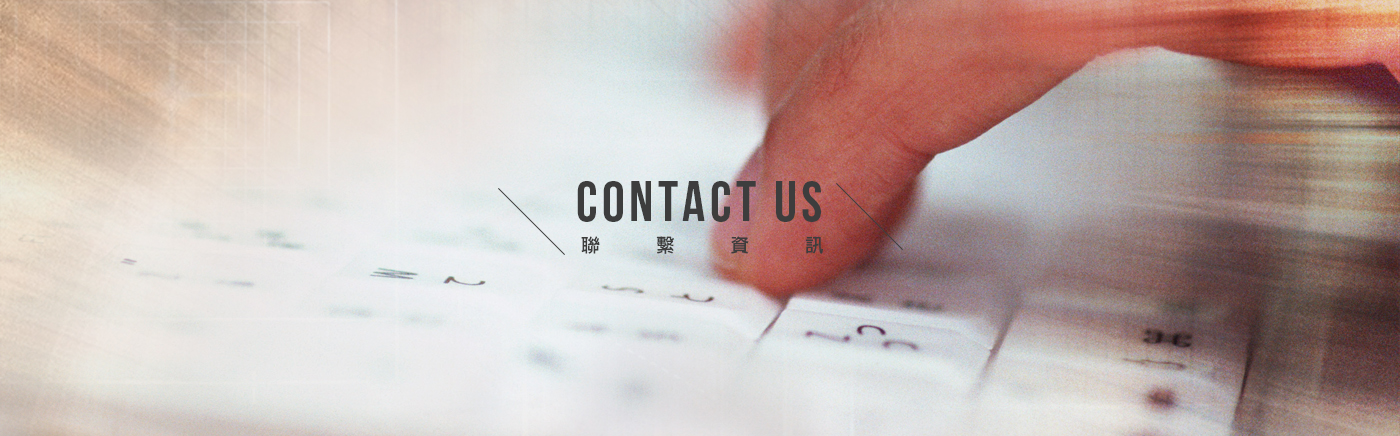
<style>
.page{position:relative;width:1400px;height:436px}
.page>*{position:absolute;margin:0}
.t1{font:56.9px "BebasNeue";letter-spacing:0.075em;color:#3d3d3d}
.t2{font:18.3px "AdobeFanHeitiStd-Bold";letter-spacing:0.075em;color:#3d3d3d}
</style>
<div class="page">
<p class="t1" style="left:577px;top:181px;width:244px;height:41px">contact us</p>
<p class="t2" style="left:581px;top:236px;width:242px;height:18px">聯          繫          資          訊</p>
</div>
